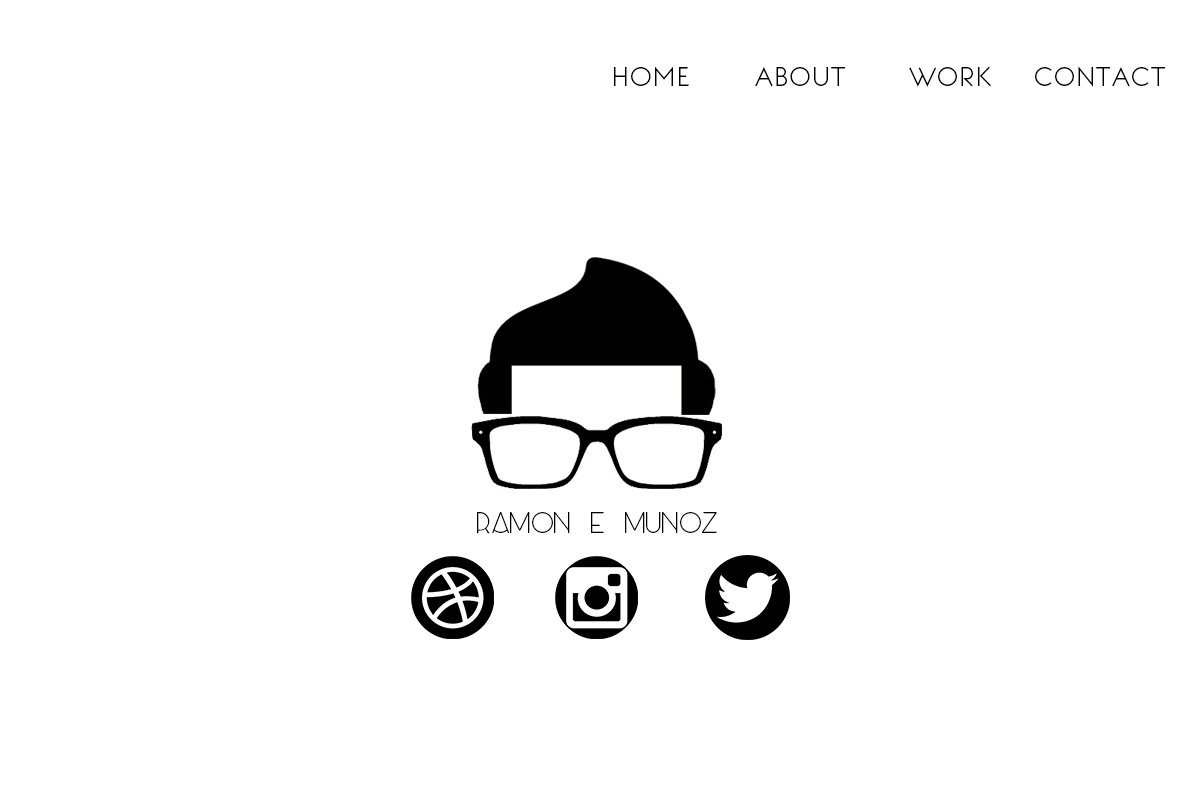
<style>
.page{position:relative;width:1200px;height:800px;background:#ffffff}
.page>*{position:absolute;margin:0}
.t1{font:25.4px "BonvenoCF-Light";color:#000000}
.t2{font:25px "BonvenoCF-Light";color:#000000}
.t3{font:9.5px "Azedo-Light";color:#000000}
</style>
<div class="page">
<p class="t1" style="left:614px;top:66px;width:75px;height:20px">HOME</p>
<p class="t2" style="left:755px;top:67px;width:91px;height:20px">ABOUT</p>
<p class="t2" style="left:909px;top:66px;width:82px;height:21px">WORK</p>
<p class="t2" style="left:1035px;top:66px;width:131px;height:21px">CONTACT</p>
<p class="t3" style="left:477px;top:512px;width:240px;height:22px">Ramon E Munoz</p>
</div>
